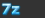
<style>
.page{position:relative;width:45px;height:18px;background:#333333}
.page>*{position:absolute;margin:0}
.t1{font:14px "Verdana-Bold"}
</style>
<div class="page">
<p class="t1" style="left:2px;top:3px;width:18px;height:12px">7z</p>
</div>
